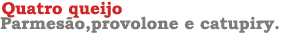
<style>
.page{position:relative;width:300px;height:50px;background:#ffffff}
.page>*{position:absolute;margin:0}
.t1{font:17px "BookmanOldStyle-Bold";color:#d42525}
.t2{font:17px "BookmanOldStyle-Bold";color:#7c7c79}
</style>
<div class="page">
<p class="t1" style="left:2px;top:1px;width:120px;height:17px">Quatro queijo</p>
<p class="t2" style="left:0px;top:16px;width:279px;height:17px">Parmesão,provolone e catupiry.</p>
</div>
